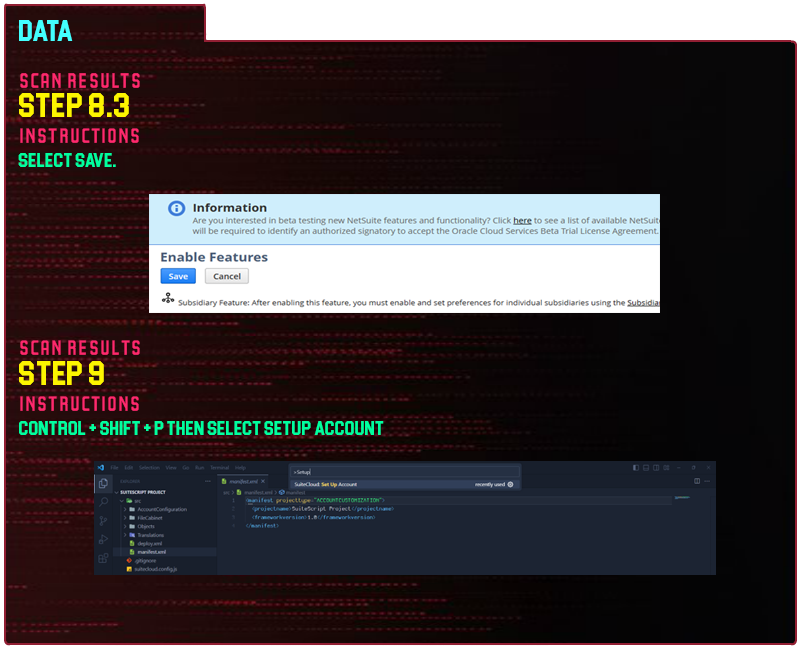
<style>
.page{position:relative;width:800px;height:650px}
.page>*{position:absolute;margin:0}
.t1{font:30px "Blockletter";color:#43ffff}
.t2{font:35px "Party-Lights-[WLM]-Flat";color:#ff296d}
.t3{font:35px "Blockletter";color:#fdf500}
.t4{font:20px "Blockletter";color:#00ff9f}
.t5{font:34.9px "Party-Lights-[WLM]-Flat";color:#ff296d}
.t6{font:34.9px "Blockletter";color:#fdf500}
.t7{font:19.9px "Blockletter";color:#00ff9f}
</style>
<div class="page">
<p class="t1" style="left:19px;top:20px;width:54px;height:21px">Data</p>
<p class="t2" style="left:20px;top:73px;width:120px;height:15px">Scan REsults</p>
<p class="t3" style="left:19px;top:93px;width:110px;height:24px">Step 8.3</p>
<p class="t2" style="left:20px;top:128px;width:119px;height:15px">instructions</p>
<p class="t4" style="left:18px;top:153px;width:98px;height:14px">select save.</p>
<p class="t5" style="left:20px;top:340px;width:120px;height:15px">Scan REsults</p>
<p class="t6" style="left:19px;top:361px;width:85px;height:24px">Step 9</p>
<p class="t5" style="left:20px;top:396px;width:119px;height:15px">instructions</p>
<p class="t7" style="left:19px;top:421px;width:365px;height:14px">Control + Shift + P then Select Setup Account</p>
</div>
